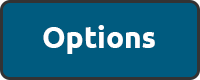
<style>
.page{position:relative;width:200px;height:80px;background:#005b7f}
.page>*{position:absolute;margin:0}
.t1{font:30px "Ubuntu-Bold";color:#ffffff}
</style>
<div class="page">
<p class="t1" style="left:43px;top:25px;width:112px;height:29px">Options</p>
</div>
